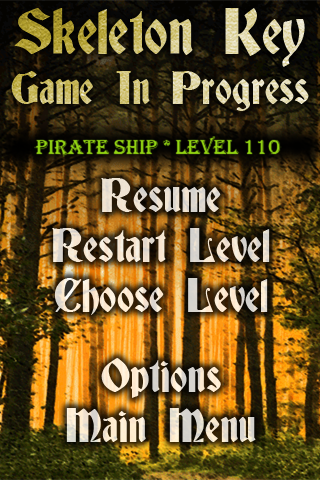
<style>
.page{position:relative;width:320px;height:480px}
.page>*{position:absolute;margin:0}
.t1{font:42px "Deutsch-Gothic"}
.t2{font:59px "Deutsch-Gothic"}
.t3{font:21px "Algerian";color:#93d512}
.t4{font:43px/50px "Deutsch-Gothic";color:#f0e3d0}
.t5{font:43px/80px "Deutsch-Gothic";color:#f0e3d0}
</style>
<div class="page">
<p class="t1" style="left:11px;top:8px;width:298px;height:103px;text-align:center"><span class="t2">Skeleton Key<br></span>Game In Progress</p>
<p class="t3" style="left:34px;top:136px;width:248px;height:21px">Pirate Ship * Level 110</p>
<p class="t4" style="left:52px;top:178px;width:218px;height:264px;text-align:center">Resume<br>Restart Level<br>Choose Level<br><span class="t5">Options<br></span>Main Menu</p>
</div>
